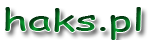
<style>
.page{position:relative;width:150px;height:40px;background:#ffffff}
.page>*{position:absolute;margin:0}
.t1{font:30px "ComicSansMS";scale:1.5 1}
</style>
<div class="page">
<p class="t1" style="left:5px;top:7px;width:136px;height:33px">haks.pl</p>
</div>
